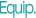
<style>
.page{position:relative;width:36px;height:18px;background:#ffffff}
.page>*{position:absolute;margin:0}
.t1{font:16px "UDShinGoPro-Regular";letter-spacing:-0.08em;color:#26a1a1;scale:0.9 1}
</style>
<div class="page">
<p class="t1" style="left:0px;top:1px;width:36px;height:17px">Equip.</p>
</div>
